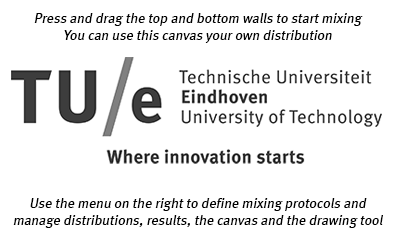
<style>
.page{position:relative;width:400px;height:240px;background:#ffffff}
.page>*{position:absolute;margin:0}
.t1{font:14px "TUEMeta-Book";color:#000000;font-style:italic}
</style>
<div class="page">
<p class="t1" style="left:34px;top:13px;width:329px;height:30px;text-align:center">Press and drag the top and bottom walls to start mixing<br>You can use this canvas your own distribution</p>
<p class="t1" style="left:13px;top:198px;width:370px;height:30px;text-align:center">Use the menu on the right to define mixing protocols and manage distributions, results, the canvas and the drawing tool</p>
</div>
